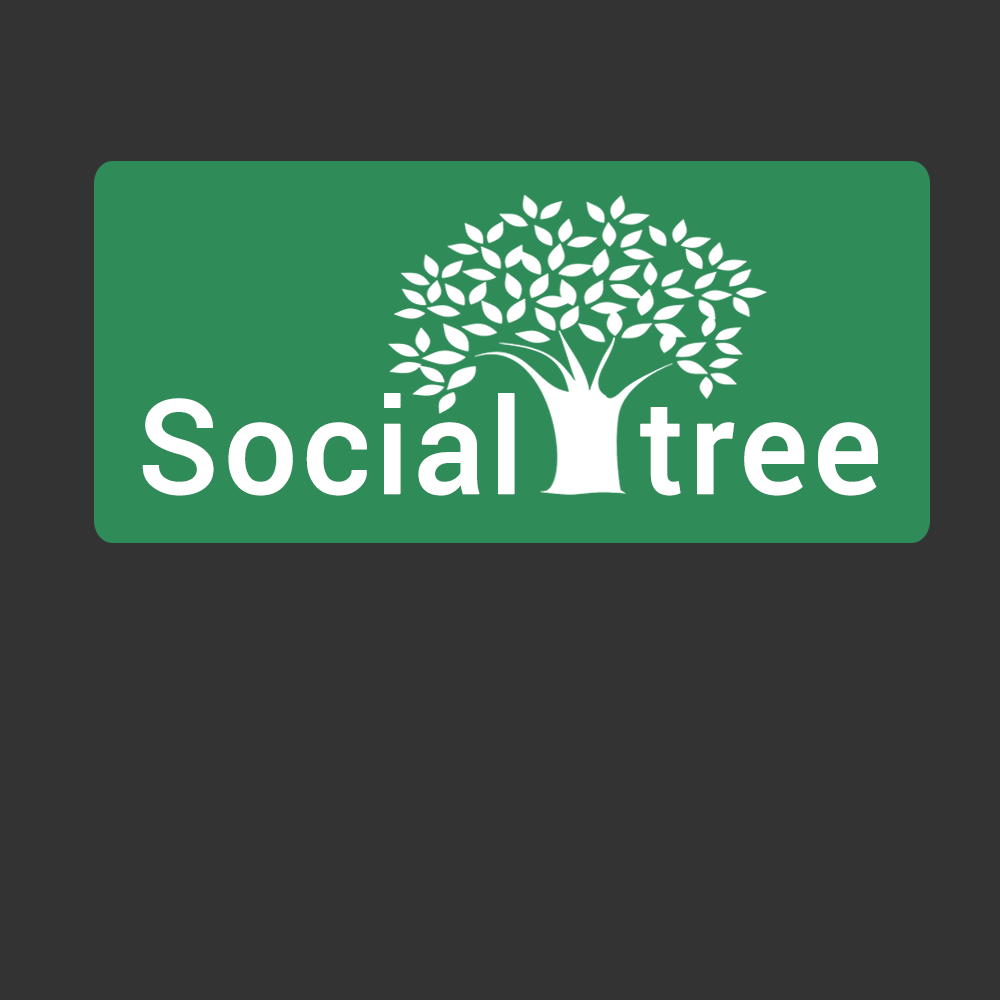
<style>
.page{position:relative;width:1000px;height:1000px;background:#333333}
.page>*{position:absolute;margin:0}
.t1{font:131.3px "Roboto-Medium";letter-spacing:0.01em;color:#ffffff;font-weight:bold}
</style>
<div class="page">
<p class="t1" style="left:142px;top:393px;width:736px;height:103px">Social   tree</p>
</div>
